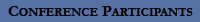
<style>
.page{position:relative;width:200px;height:22px;background:#5671a4}
.page>*{position:absolute;margin:0}
.t1{font:12px "Garamond-Bold";color:#000000}
.t2{font:16px "Garamond-Bold";color:#000000}
</style>
<div class="page">
<p class="t1" style="left:8px;top:6px;width:185px;height:10px"><span class="t2">C</span>ONFERENCE<span class="t2"> P</span>ARTICIPANTS</p>
</div>
